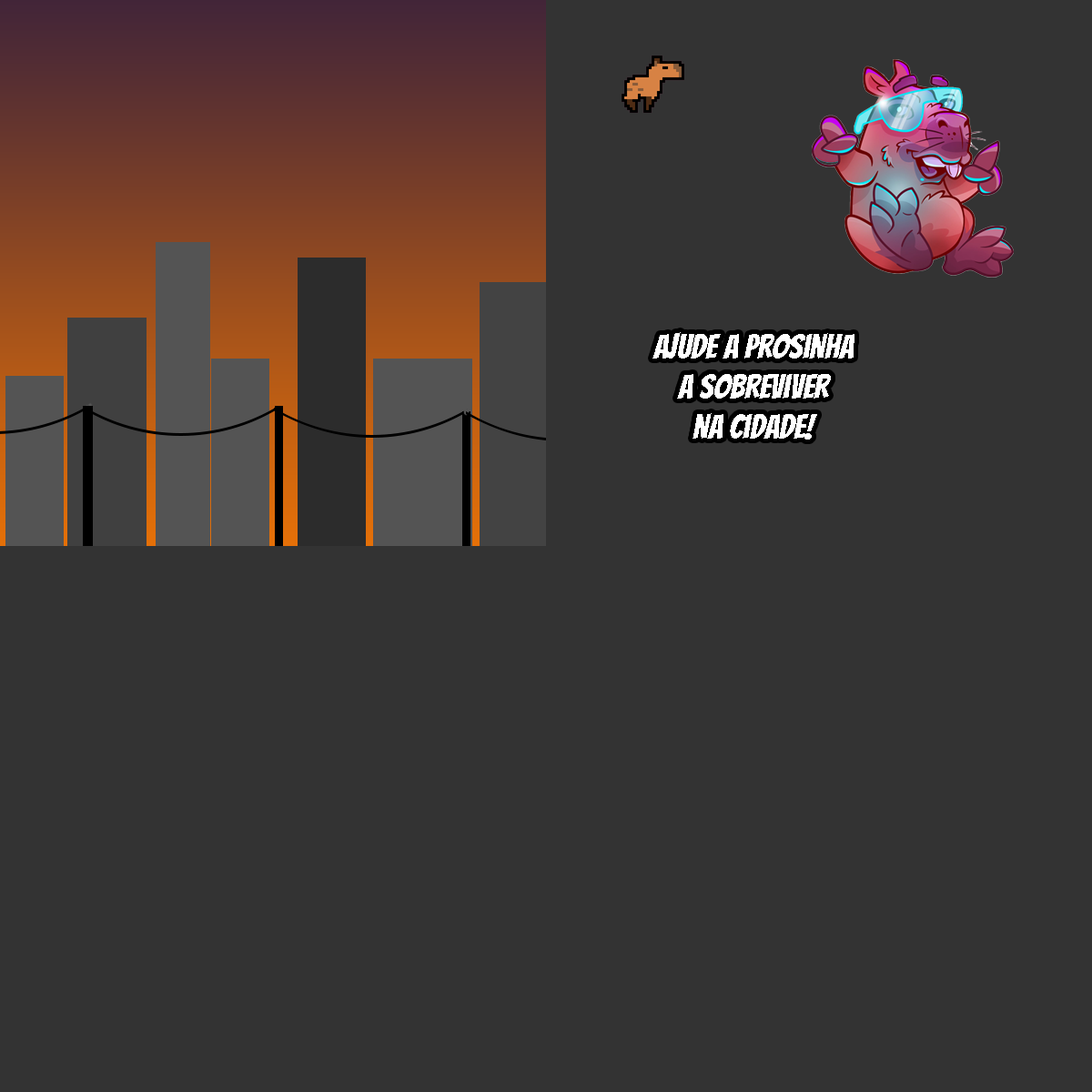
<style>
.page{position:relative;width:1092px;height:1092px;background:#333333}
.page>*{position:absolute;margin:0}
.t1{font:33.4px "Bangers-Regular";color:#ffffff}
</style>
<div class="page">
<p class="t1" style="left:652px;top:332px;width:202px;height:108px;text-align:center">ajude a prosinha<br>a sobreviver<br>na cidade!</p>
</div>
